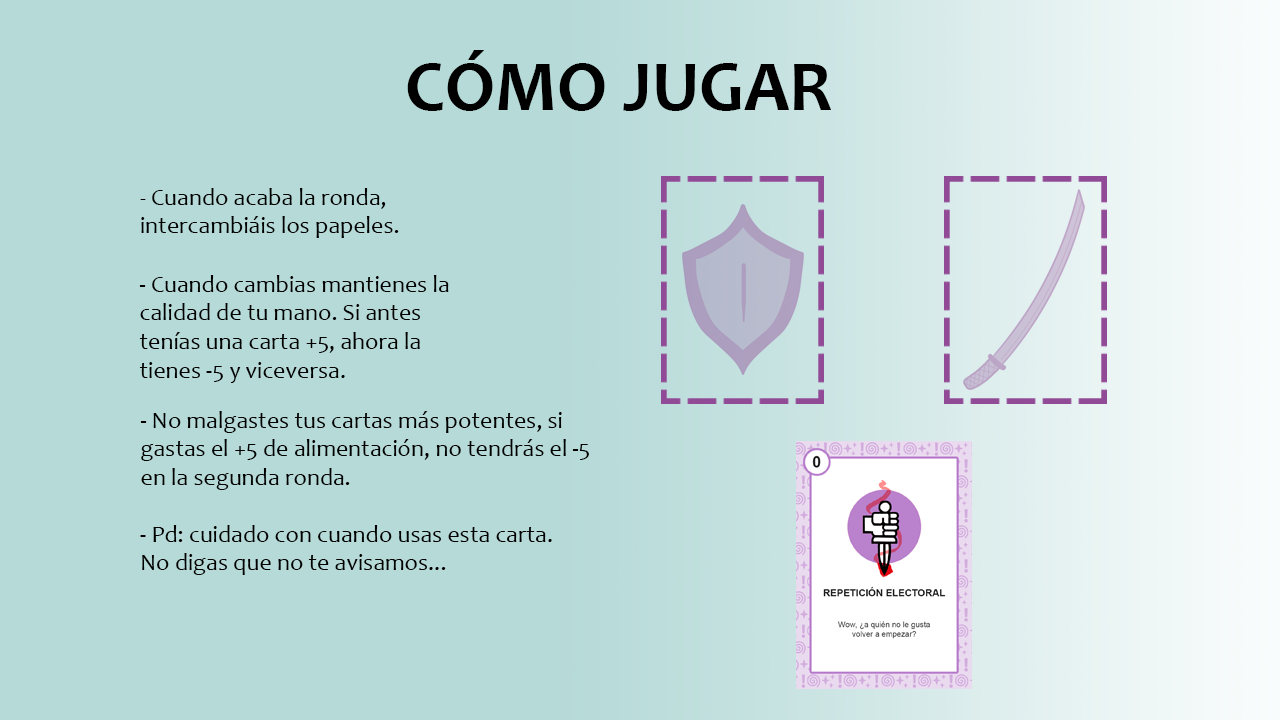
<style>
.page{position:relative;width:1280px;height:720px;background:#b6dad8}
.page>*{position:absolute;margin:0}
.t1{font:72px "Candara-Bold";color:#000000}
.t2{font:24px "Candara";color:#000000}
.t3{font:24px "Candara-Italic";color:#000000}
</style>
<div class="page">
<p class="t1" style="left:407px;top:50px;width:424px;height:61px">CÓMO JUGAR</p>
<p class="t2" style="left:140px;top:188px;width:259px;height:50px"><span class="t3">- </span>Cuando acaba la ronda, intercambiáis los papeles.</p>
<p class="t2" style="left:139px;top:275px;width:310px;height:108px">- Cuando cambias mantienes la calidad de tu mano. Si antes tenías una carta +5, ahora la tienes -5 y viceversa.</p>
<p class="t2" style="left:140px;top:411px;width:449px;height:79px">- No malgastes tus cartas más potentes, si gastas el +5 de alimentación, no tendrás el -5 en la segunda ronda.</p>
<p class="t2" style="left:140px;top:525px;width:412px;height:50px">- Pd: cuidado con cuando usas esta carta. No digas que no te avisamos...</p>
</div>
